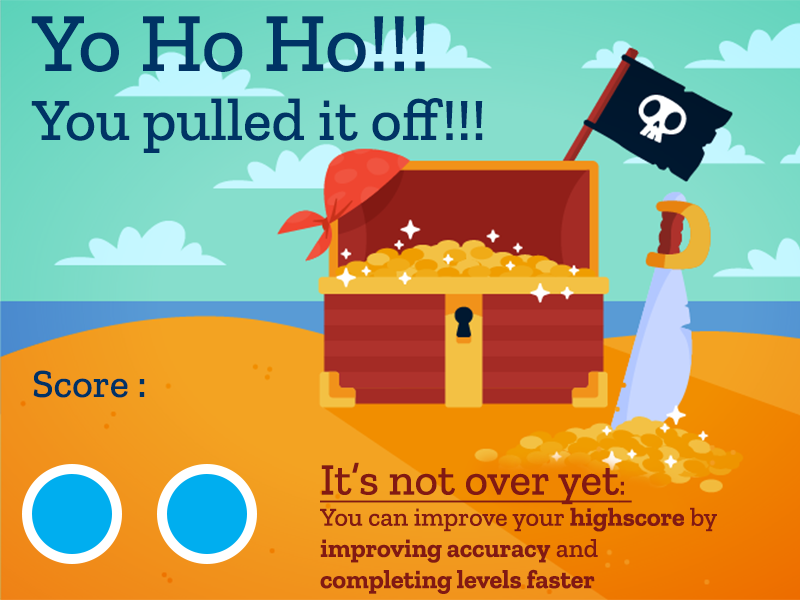
<style>
.page{position:relative;width:800px;height:600px}
.page>*{position:absolute;margin:0}
.t1{font:84px "ZillaSlab-Medium";color:#003365}
.t2{font:60px "ZillaSlab-Medium";color:#003365}
.t3{font:40px "ZillaSlab-Medium";color:#003365}
.t4{font:26px "ZillaSlab-Bold";color:#821913}
.t5{font:45px "ZillaSlab-Medium";color:#821913;text-decoration:underline}
.t6{font:28px "ZillaSlab-Medium";color:#821913;text-decoration:underline}
.t7{font:26px "ZillaSlab-Medium";color:#821913}
</style>
<div class="page">
<p class="t1" style="left:31px;top:16px;width:394px;height:56px">Yo Ho Ho!!!</p>
<p class="t2" style="left:31px;top:98px;width:452px;height:55px">You pulled it off!!!</p>
<p class="t3" style="left:33px;top:370px;width:112px;height:28px">Score :</p>
<p class="t4" style="left:320px;top:462px;width:397px;height:132px"><span class="t5">It’s not over yet</span><span class="t6">: <br></span><span class="t7">You can improve your </span>highscore<span class="t7"> by <br></span>improving accuracy<span class="t7"> and <br></span>completing levels faster</p>
</div>
